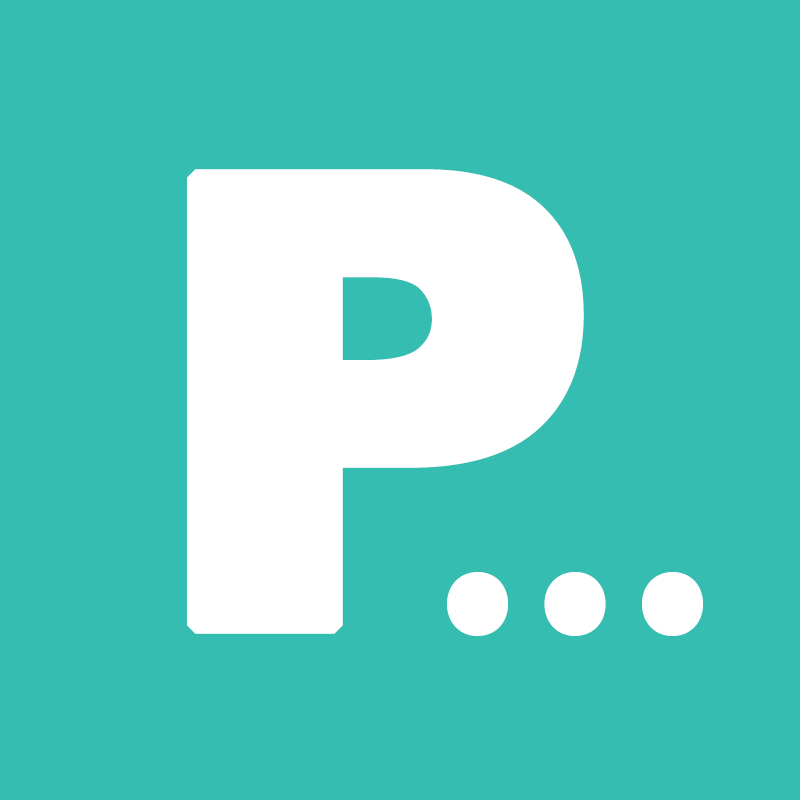
<style>
.page{position:relative;width:800px;height:800px;background:#35bdb2}
.page>*{position:absolute;margin:0}
.t1{font:625px "Arial-Black";color:#ffffff;font-weight:bold}
.t2{font:416.7px "MyriadPro-Regular";color:#ffffff;font-weight:bold}
</style>
<div class="page">
<p class="t1" style="left:187px;top:169px;width:397px;height:465px">P</p>
<p class="t2" style="left:447px;top:572px;width:256px;height:64px">...</p>
</div>
